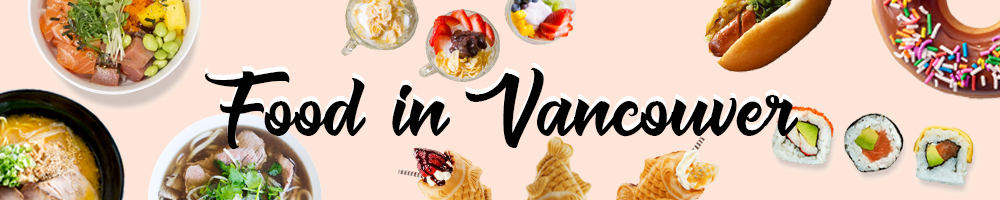
<style>
.page{position:relative;width:1000px;height:200px;background:#fde6d9}
.page>*{position:absolute;margin:0}
.t1{font:100px "Muskaters"}
.t2{font:100px "Muskaters";color:#010101}
</style>
<div class="page">
<p class="t1" style="left:205px;top:63px;width:593px;height:82px">Food in Vancouver</p>
<p class="t2" style="left:205px;top:68px;width:593px;height:82px">Food in Vancouver</p>
</div>
